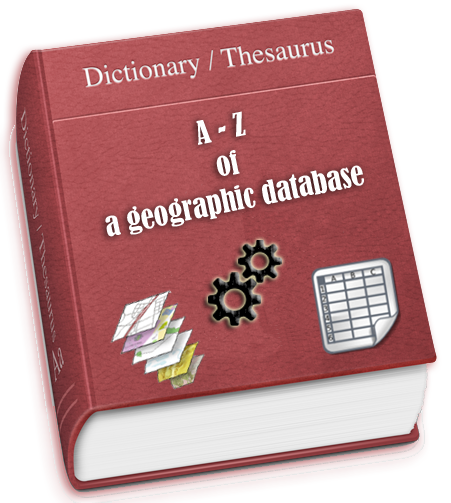
<style>
.page{position:relative;width:451px;height:503px}
.page>*{position:absolute;margin:0}
.t1{font:30px "BernardMT-Condensed";color:#fefefe}
</style>
<div class="page">
<p class="t1" style="left:105px;top:111px;width:259px;height:126px;text-align:center;rotate:-12deg">A - Z<br>of<br>a geographic database</p>
</div>
